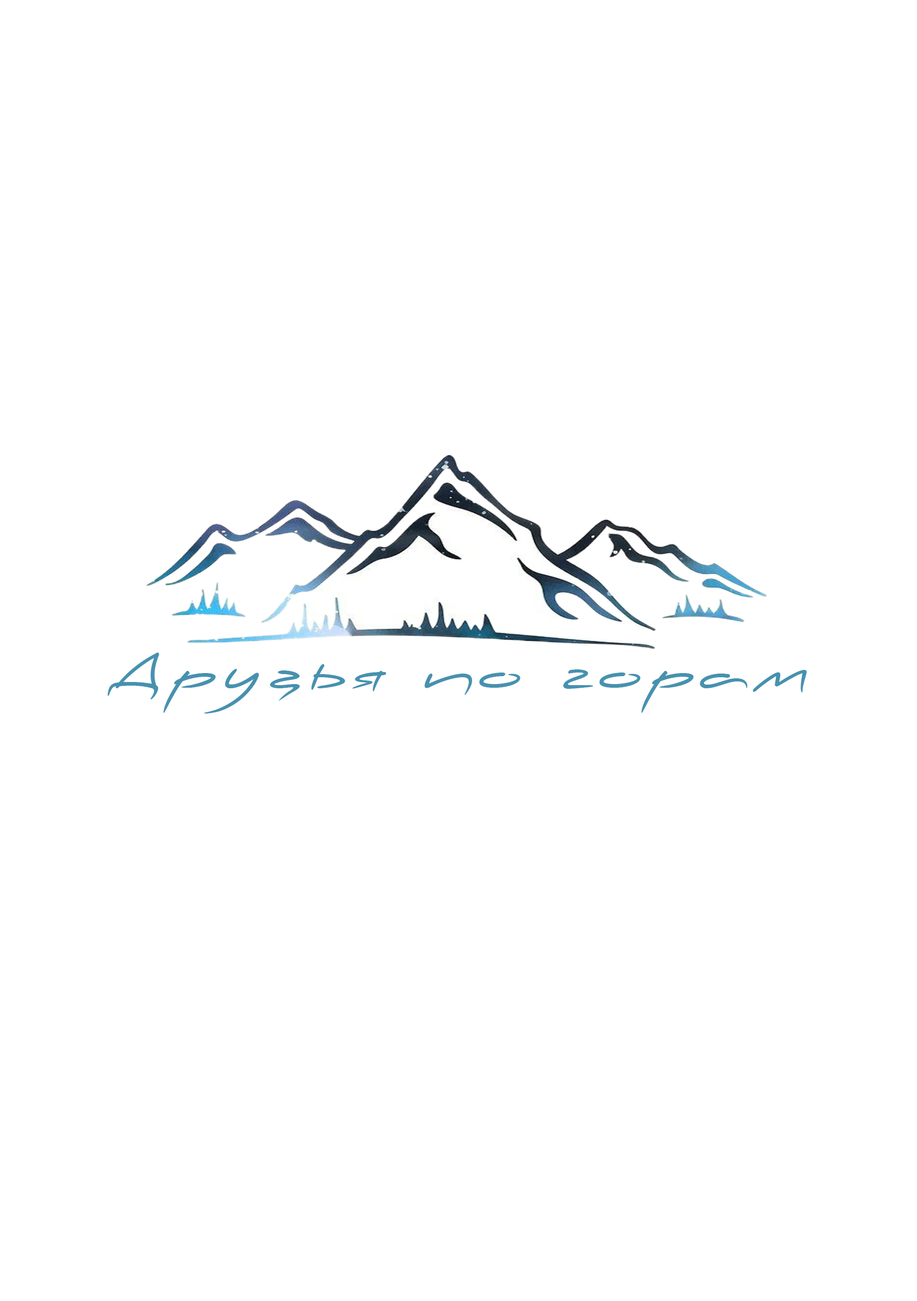
<style>
.page{position:relative;width:917px;height:1301px;background:#ffffff}
.page>*{position:absolute;margin:0}
.t1{font:48.1px "PFScandalPro-DisplayBold";letter-spacing:0.075em;color:#4791af;font-style:italic}
</style>
<div class="page">
<p class="t1" style="left:108px;top:652px;width:699px;height:61px">Друзья по горам</p>
</div>
